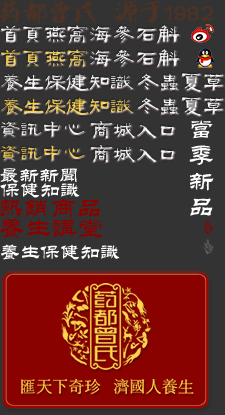
<style>
.page{position:relative;width:225px;height:415px;background:#333333}
.page>*{position:absolute;margin:0}
.t1{font:25px "-";color:#4e3224}
.t2{font:25px "-";color:#4e3224;font-weight:bold}
.t3{font:22.5px "FZGLFW--GB1-0";color:#ffffff}
.t4{font:22.5px "FZGLFW--GB1-0";color:#ffd44d}
.t5{font:22.5px "FZGLFW--GB1-0";color:#ffd34d}
.t6{font:26px/26px "FZL2FW--GB1-0";color:#ffffff}
.t7{font:20px "FZL2FW--GB1-0";color:#ffffff}
.t8{font:26px "FZL2FW--GB1-0";color:#890200}
</style>
<div class="page">
<p class="t1" style="left:0px;top:0px;width:214px;height:24px">药都曾氏  源于<span class="t2">1982</span></p>
<p class="t3" style="left:1px;top:25px;width:41px;height:17px">首页</p>
<p class="t3" style="left:45px;top:25px;width:42px;height:18px">燕窝</p>
<p class="t3" style="left:90px;top:25px;width:44px;height:18px">海参</p>
<p class="t3" style="left:137px;top:25px;width:42px;height:18px">石斛</p>
<p class="t4" style="left:1px;top:49px;width:41px;height:17px">首页</p>
<p class="t5" style="left:45px;top:49px;width:42px;height:18px">燕窝</p>
<p class="t3" style="left:90px;top:49px;width:44px;height:18px">海参</p>
<p class="t3" style="left:137px;top:49px;width:42px;height:18px">石斛</p>
<p class="t3" style="left:1px;top:73px;width:132px;height:17px">养生保健知识</p>
<p class="t3" style="left:137px;top:73px;width:87px;height:19px">冬虫夏草</p>
<p class="t5" style="left:1px;top:97px;width:132px;height:17px">养生保健知识</p>
<p class="t3" style="left:137px;top:97px;width:87px;height:19px">冬虫夏草</p>
<p class="t3" style="left:1px;top:121px;width:83px;height:16px">资讯中心</p>
<p class="t3" style="left:90px;top:121px;width:84px;height:17px">商城入口</p>
<p class="t6" style="left:189px;top:120px;width:25px;height:96px">当<br>季<br>新<br>品</p>
<p class="t5" style="left:1px;top:145px;width:83px;height:16px">资讯中心</p>
<p class="t3" style="left:90px;top:145px;width:84px;height:17px">商城入口</p>
<p class="t7" style="left:0px;top:168px;width:77px;height:15px">最新新闻</p>
<p class="t7" style="left:0px;top:182px;width:80px;height:16px">保健知识</p>
<p class="t8" style="left:0px;top:198px;width:101px;height:20px">热销商品</p>
<p class="t8" style="left:0px;top:218px;width:103px;height:20px">养生讲堂</p>
<p class="t7" style="left:1px;top:244px;width:119px;height:16px">养生保健知识</p>
</div>
